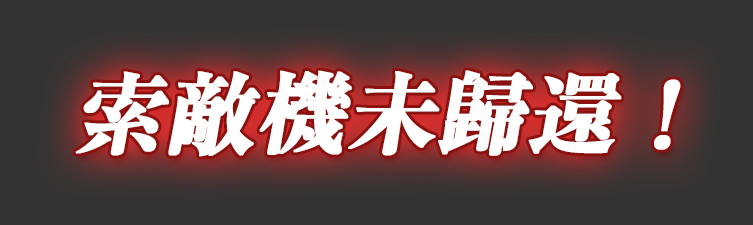
<style>
.page{position:relative;width:753px;height:225px;background:#333333}
.page>*{position:absolute;margin:0}
.t1{font:90px "RyuminPr6N-ExBold";letter-spacing:-0.025em;color:#ffffff;font-weight:bold;font-style:italic}
</style>
<div class="page">
<p class="t1" style="left:75px;top:70px;width:606px;height:87px">索敵機未歸還！</p>
</div>
